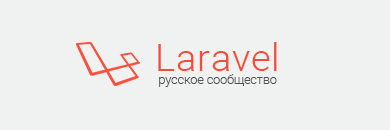
<style>
.page{position:relative;width:390px;height:130px;background:#f0f2f1}
.page>*{position:absolute;margin:0}
.t1{font:37.5px "Roboto-Light";letter-spacing:0.034em;color:#f44c37}
.t2{font:12.5px "Roboto-Light";color:#525252}
</style>
<div class="page">
<p class="t1" style="left:158px;top:42px;width:119px;height:29px">Laravel</p>
<p class="t2" style="left:159px;top:74px;width:118px;height:13px">русское сообщество</p>
</div>
